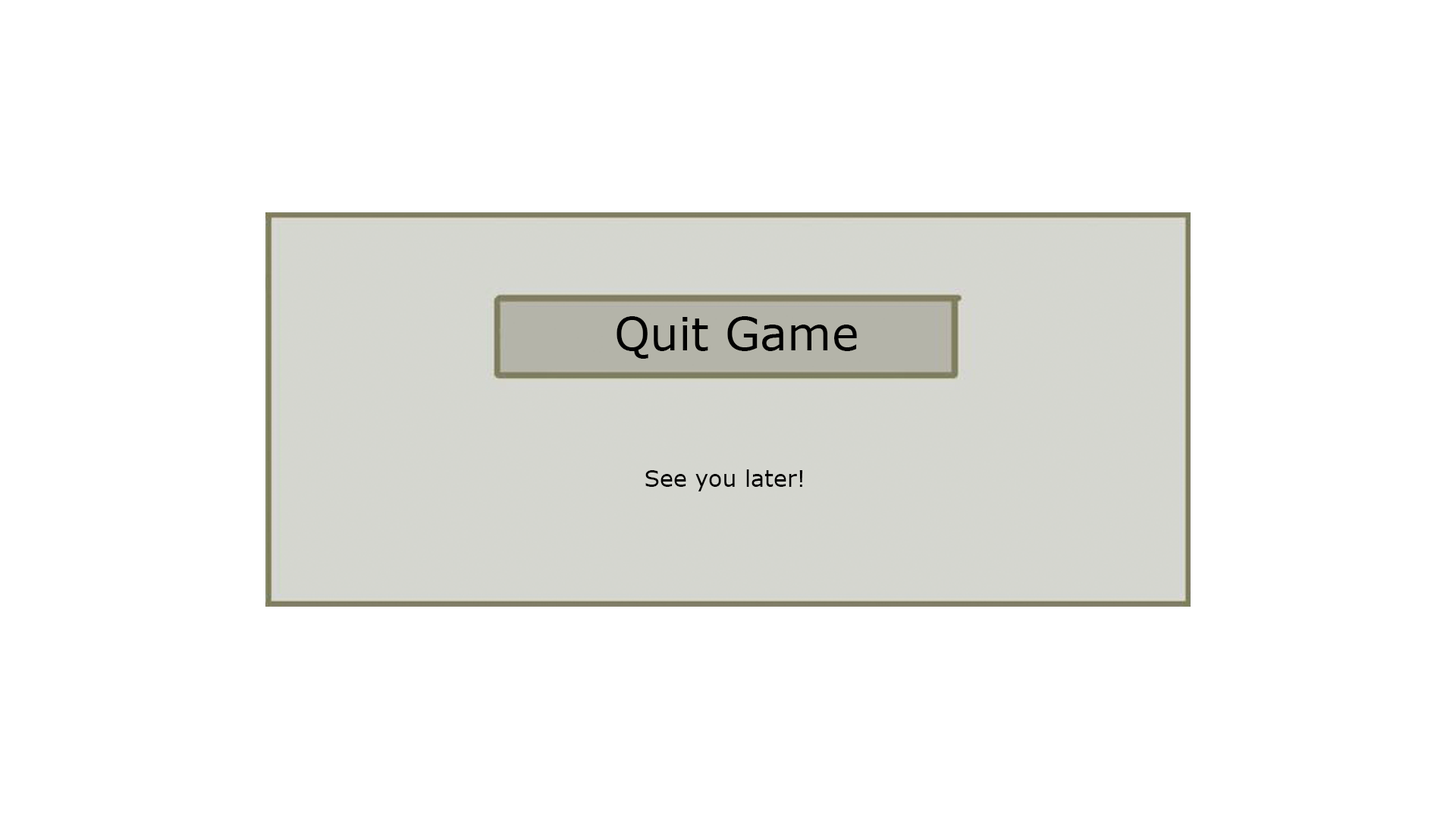
<style>
.page{position:relative;width:1456px;height:819px;background:#ffffff}
.page>*{position:absolute;margin:0}
.t1{font:45.5px "Verdana";color:#000000}
.t2{font:22.7px "Verdana";color:#000000}
</style>
<div class="page">
<p class="t1" style="left:617px;top:316px;width:240px;height:43px">Quit Game</p>
<p class="t2" style="left:645px;top:469px;width:157px;height:22px">See you later!</p>
</div>
